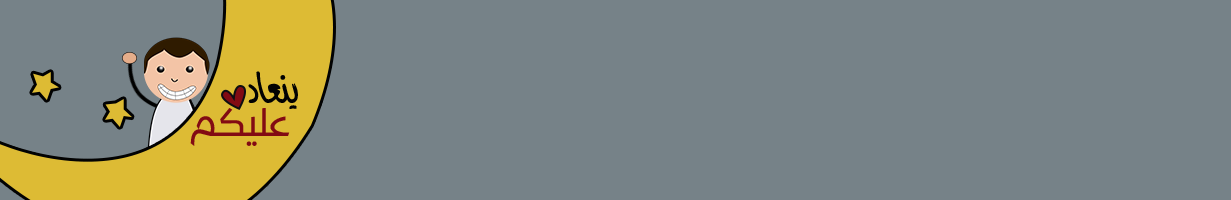
<style>
.page{position:relative;width:1231px;height:200px;background:#768288}
.page>*{position:absolute;margin:0}
.t1{font:45.5px "Farah";color:#020202}
.t2{font:38.7px "KufyanArabic-Medium";color:#820b13}
</style>
<div class="page">
<p class="t1" style="left:248px;top:71px;width:50px;height:38px">ينعاد</p>
<p class="t2" style="left:190px;top:108px;width:100px;height:38px">عليكم</p>
</div>
